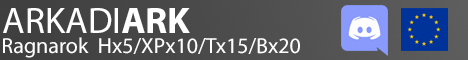
<style>
.page{position:relative;width:468px;height:60px}
.page>*{position:absolute;margin:0}
.t1{font:37px "MyriadPro-Regular";color:#ffffff}
.t2{font:37px "MyriadPro-Bold";color:#ffffff}
.t3{font:22px "MyriadPro-Regular";color:#ffffff}
.t4{font:24px "MyriadPro-Regular";color:#ffffff}
</style>
<div class="page">
<p class="t1" style="left:3px;top:8px;width:187px;height:25px">ARKADI<span class="t2">ARK</span></p>
<p class="t3" style="left:3px;top:37px;width:297px;height:21px">Ragnarok  Hx5/XPx10/Tx15/Bx20 <span class="t4">[S+/Stack/CF]</span></p>
</div>
